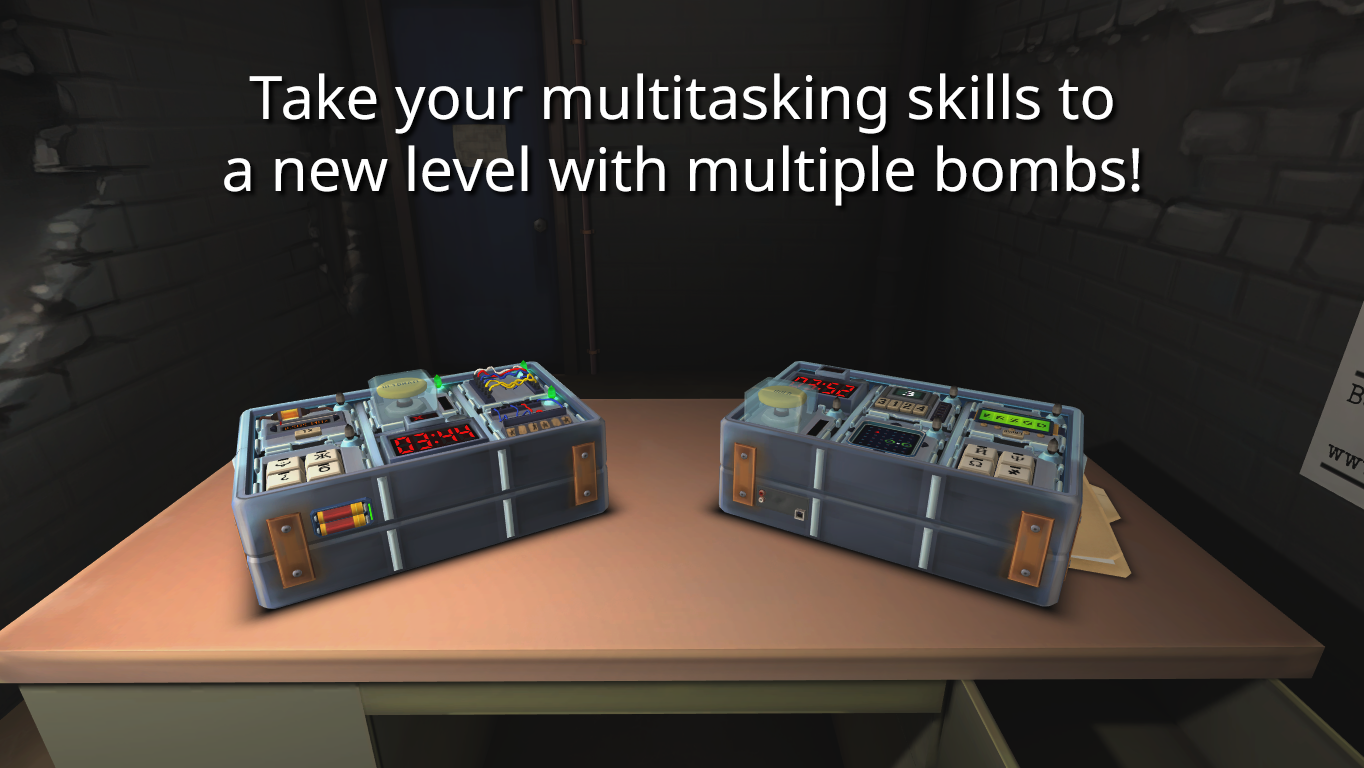
<style>
.page{position:relative;width:1364px;height:768px}
.page>*{position:absolute;margin:0}
.t1{font:60px "NotoSans";color:#ffffff}
</style>
<div class="page">
<p class="t1" style="left:224px;top:73px;width:916px;height:133px;text-align:center">Take your multitasking skills to<br>a new level with multiple bombs!</p>
</div>
